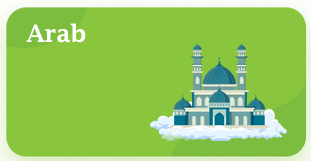
<style>
.page{position:relative;width:311px;height:161px;background:#8ac53e}
.page>*{position:absolute;margin:0}
.t1{font:24px "LucidaFax-Demi";color:#ffffff}
</style>
<div class="page">
<p class="t1" style="left:26px;top:23px;width:60px;height:20px">Arab</p>
</div>
